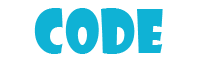
<style>
.page{position:relative;width:200px;height:64px;background:#ffffff}
.page>*{position:absolute;margin:0}
.t1{font:58.5px "ShowcardGothic-Reg";letter-spacing:0.02em;color:#0fb2d5;scale:0.85 1}
</style>
<div class="page">
<p class="t1" style="left:34px;top:8px;width:129px;height:46px">CODE</p>
</div>
